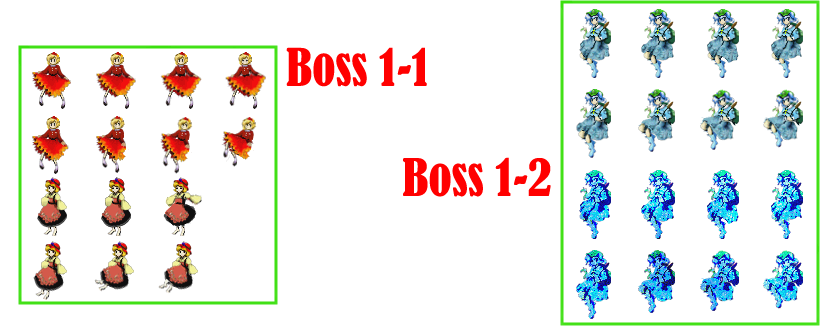
<style>
.page{position:relative;width:820px;height:326px;background:#ffffff}
.page>*{position:absolute;margin:0}
.t1{font:48px "BernardMT-Condensed";color:#ff0000}
</style>
<div class="page">
<p class="t1" style="left:286px;top:47px;width:141px;height:40px">Boss 1-1</p>
<p class="t1" style="left:403px;top:157px;width:148px;height:40px">Boss 1-2</p>
</div>
